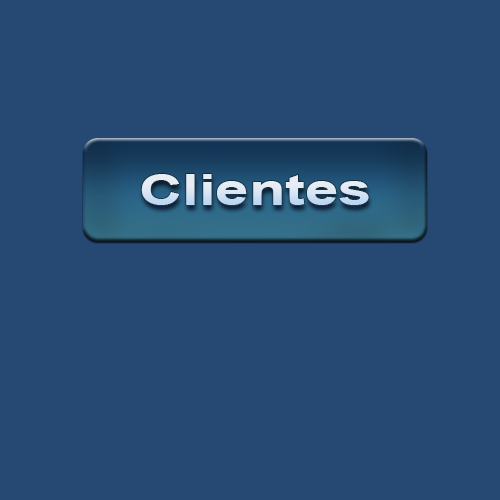
<style>
.page{position:relative;width:500px;height:500px;background:#254972}
.page>*{position:absolute;margin:0}
.t1{font:42.9px "Arial-BoldMT";color:#e8edf2;scale:1.39 1}
</style>
<div class="page">
<p class="t1" style="left:141px;top:174px;width:228px;height:31px">Clientes</p>
</div>
